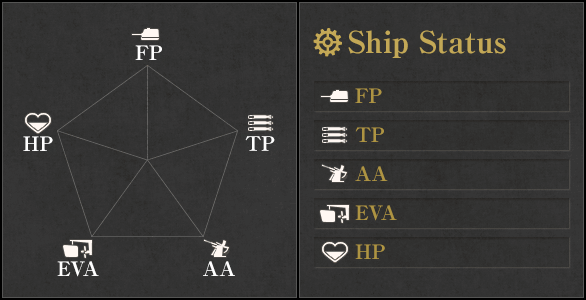
<style>
.page{position:relative;width:586px;height:300px}
.page>*{position:absolute;margin:0}
.t1{font:30px "RyuminPro-ExBold";color:#c3a856}
.t2{font:20px "RyuminPro-ExBold";color:#ffffff}
.t3{font:20px/39px "RyuminPro-ExBold";color:#ae9442}
</style>
<div class="page">
<p class="t1" style="left:348px;top:30px;width:158px;height:28px">Ship Status</p>
<p class="t2" style="left:135px;top:45px;width:27px;height:15px">FP</p>
<p class="t3" style="left:355px;top:88px;width:42px;height:171px">FP<br>TP<br>AA<br>EVA<br>HP</p>
<p class="t2" style="left:23px;top:136px;width:30px;height:15px">HP</p>
<p class="t2" style="left:245px;top:136px;width:30px;height:15px">TP</p>
<p class="t2" style="left:57px;top:261px;width:42px;height:16px">EVA</p>
<p class="t2" style="left:203px;top:261px;width:32px;height:15px">AA</p>
</div>
